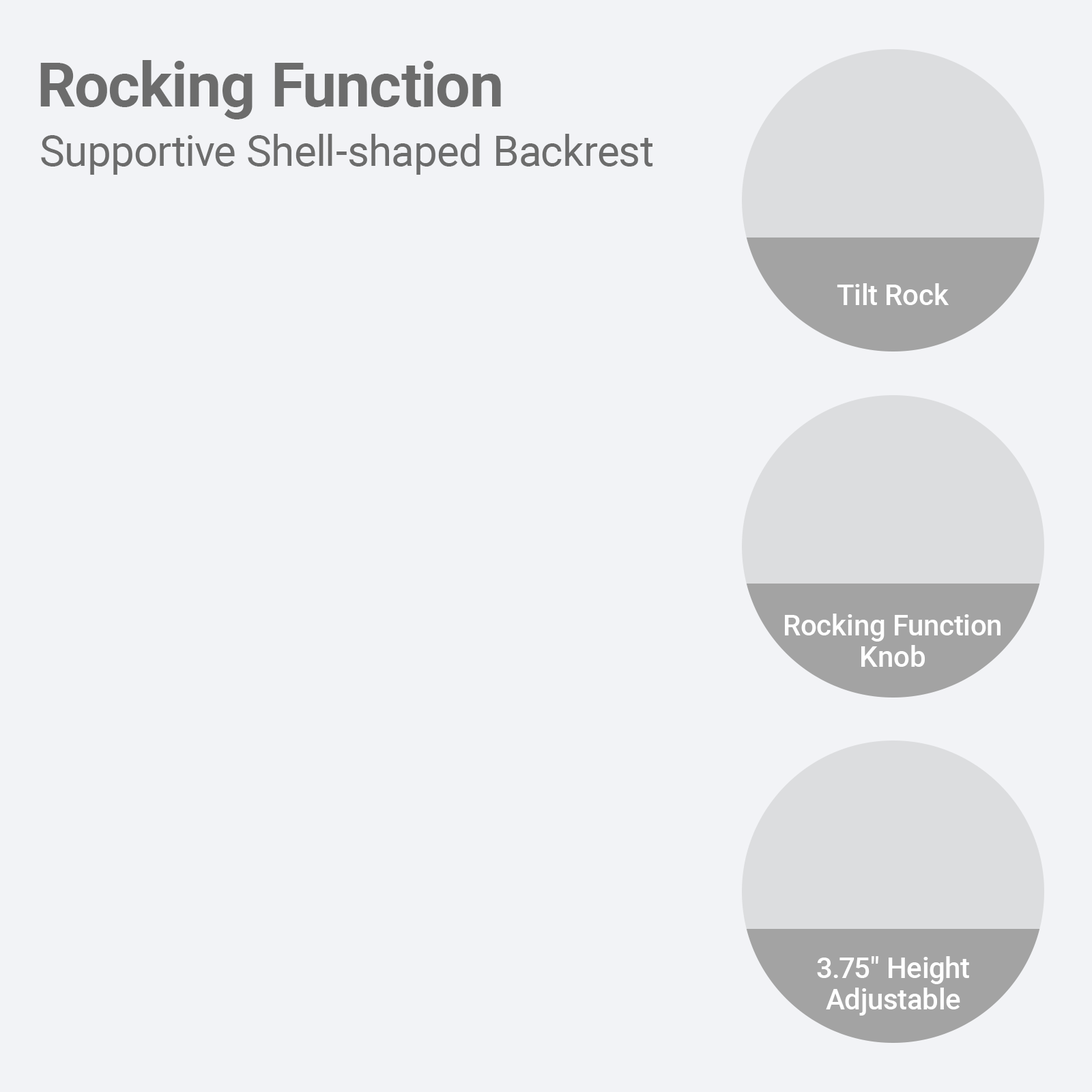
<style>
.page{position:relative;width:1092px;height:1092px;background:#f2f3f6}
.page>*{position:absolute;margin:0}
.t1{font:61.4px "Roboto-Bold";color:#6c6c6c}
.t2{font:42.3px "Roboto-Regular";color:#6c6c6c}
.t3{font:28.7px "Roboto-Medium";color:#ffffff}
.t4{font:28.7px/31.4px "Roboto-Medium";color:#ffffff}
</style>
<div class="page">
<p class="t1" style="left:40px;top:60px;width:461px;height:59px">Rocking Function</p>
<p class="t2" style="left:41px;top:134px;width:612px;height:41px">Supportive Shell-shaped Backrest</p>
<p class="t3" style="left:837px;top:283px;width:112px;height:22px">Tilt Rock</p>
<p class="t4" style="left:785px;top:614px;width:216px;height:53px;text-align:center">Rocking Function<br>Knob</p>
<p class="t4" style="left:817px;top:956px;width:152px;height:60px;text-align:center">3.75" Height<br>Adjustable</p>
</div>
